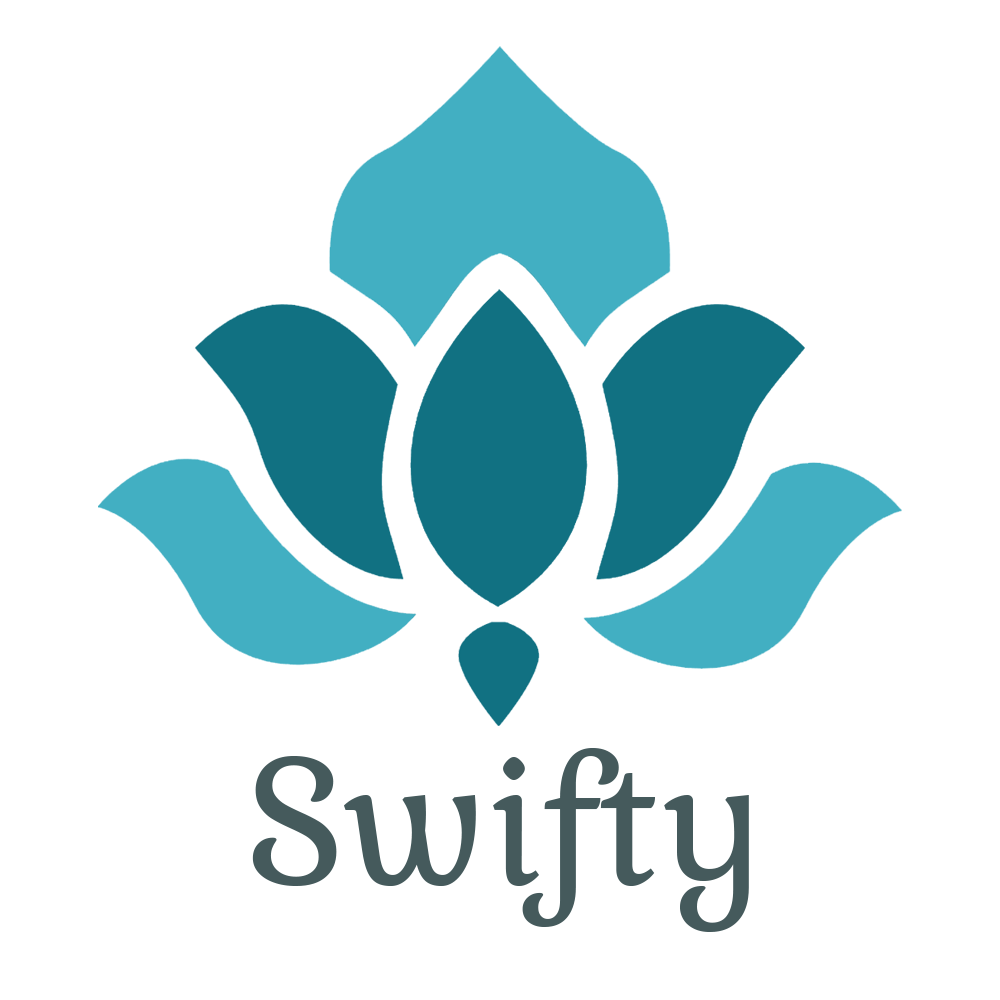
<style>
.page{position:relative;width:1000px;height:1000px;background:#ffffff}
.page>*{position:absolute;margin:0}
.t1{font:175px "Gabriela-Regular";color:#455a5c}
</style>
<div class="page">
<p class="t1" style="left:252px;top:748px;width:497px;height:184px">Swifty</p>
</div>
